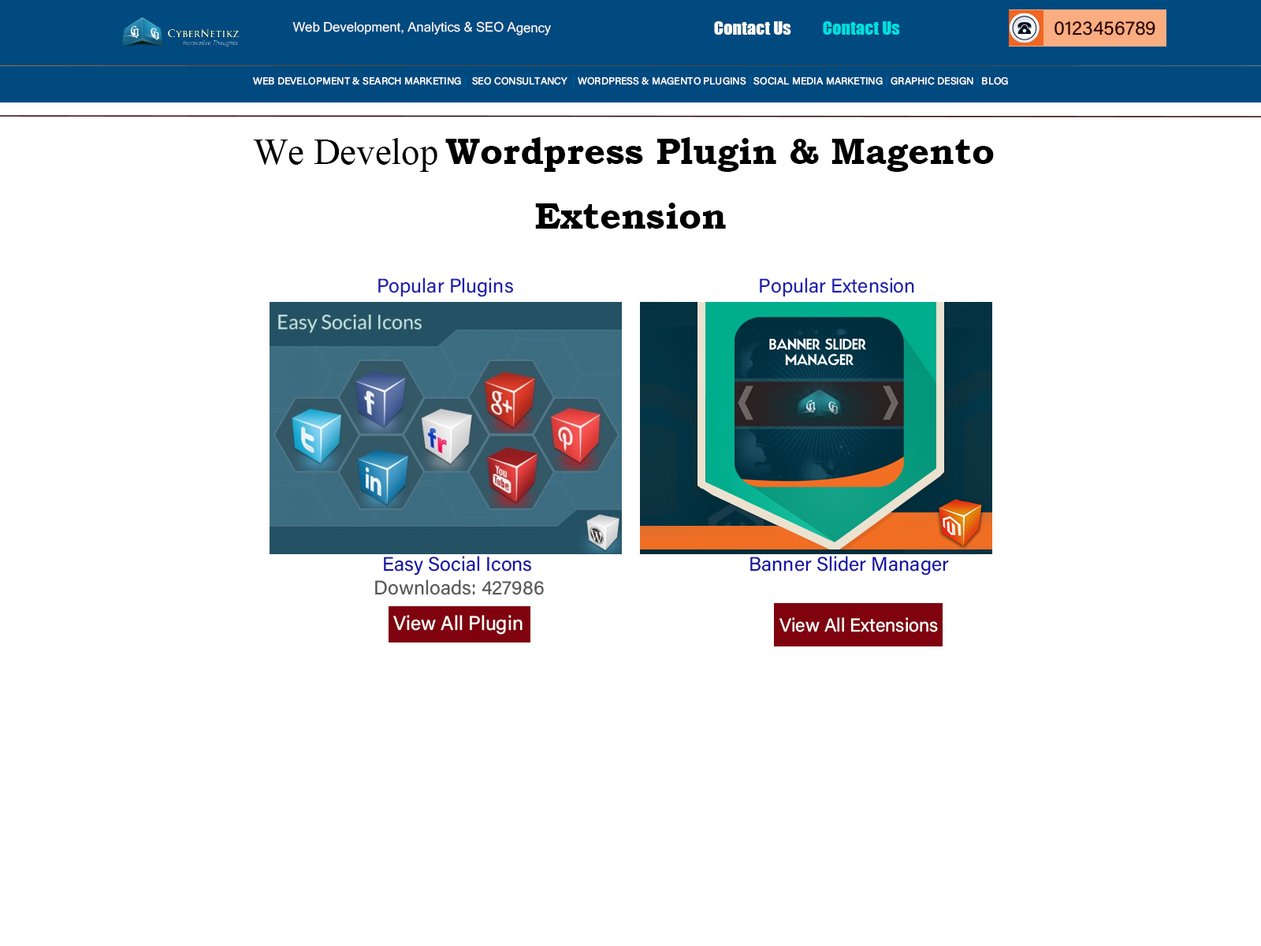
<style>
.page{position:relative;width:1261px;height:946px;background:#ffffff}
.page>*{position:absolute;margin:0}
.t1{font:13.1px "MicrosoftSansSerif";color:#f9f9f9}
.t2{font:17.6px "Impact";color:#fefff5}
.t3{font:17.6px "Impact";color:#01dfdc}
.t4{font:19.7px "AcuminConcept-Regular";color:#2b0101}
.t5{font:10px "AcuminConcept-Regular";color:#fefefe}
.t6{font:10px "AcuminConcept-Regular";color:#015a9b}
.t7{font:36.8px "BookmanOldStyle-Bold";color:#000000}
.t8{font:36.8px "TimesNewRomanPSMT";color:#000000}
.t9{font:19.7px "AcuminConcept-Regular";color:#2121ae}
.t10{font:19.7px "AcuminConcept-Regular";color:#1717a7}
.t11{font:19.7px "AcuminConcept-Regular";color:#595959}
.t12{font:19.7px "AcuminConcept-Regular";color:#ffffff}
.t13{font:18.6px "AcuminConcept-Regular";color:#ffffff}
.t14{font:18.6px "AcuminConcept-Regular";color:#2b0101}
</style>
<div class="page">
<p class="t1" style="left:292px;top:21px;width:259px;height:14px">Web Development, Analytics &amp; SEO Agency</p>
<p class="t2" style="left:714px;top:21px;width:77px;height:14px">Contact Us</p>
<p class="t3" style="left:823px;top:21px;width:77px;height:14px">Contact Us</p>
<p class="t4" style="left:1054px;top:21px;width:101px;height:14px">0123456789</p>
<p class="t5" style="left:253px;top:76px;width:755px;height:11px">WEB DEVELOPMENT &amp; SEARCH MARKETING <span class="t6">| </span> SEO CONSULTANCY  <span class="t6">|</span> WORDPRESS &amp; MAGENTO PLUGINS <span class="t6">|</span> SOCIAL MEDIA MARKETING <span class="t6">|</span> GRAPHIC DESIGN <span class="t6">|</span> BLOG</p>
<p class="t7" style="left:253px;top:137px;width:741px;height:92px;text-align:center"><span class="t8">We Develop </span>Wordpress Plugin &amp; Magento <br>Extension</p>
<p class="t9" style="left:378px;top:277px;width:135px;height:20px">Popular Plugins</p>
<p class="t9" style="left:760px;top:277px;width:154px;height:20px">Popular Extension</p>
<p class="t10" style="left:384px;top:556px;width:147px;height:19px">Easy Social Icons</p>
<p class="t10" style="left:750px;top:556px;width:199px;height:19px">Banner Slider Manager</p>
<p class="t11" style="left:375px;top:579px;width:169px;height:16px">Downloads: 427986</p>
<p class="t12" style="left:393px;top:615px;width:129px;height:19px">View All Plugin</p>
<p class="t13" style="left:779px;top:617px;width:159px;height:15px"><span class="t14"><br><br></span>View All Extensions</p>
</div>
